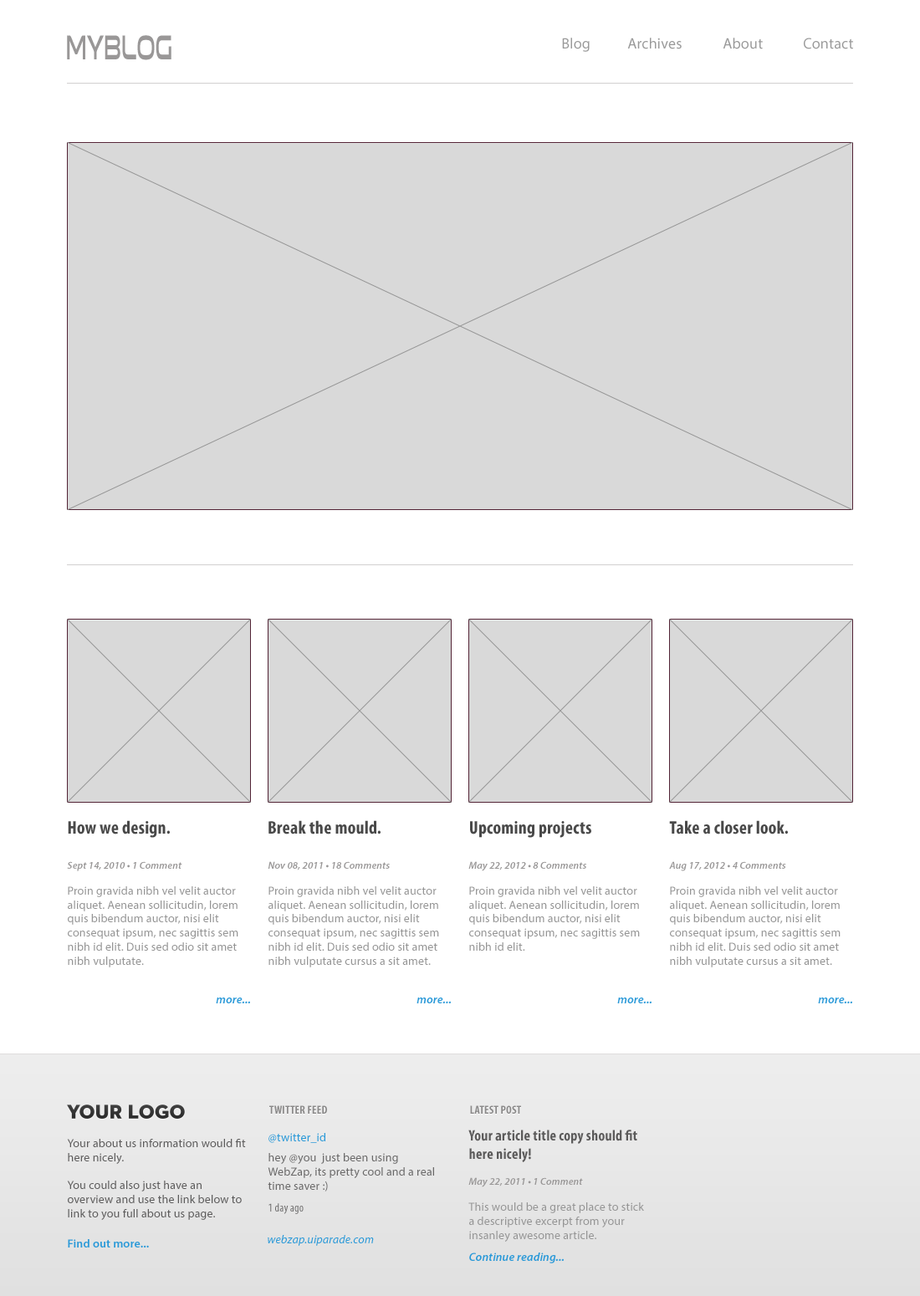
<style>
.page{position:relative;width:920px;height:1296px;background:#ffffff}
.page>*{position:absolute;margin:0}
.t1{font:15.1px "MyriadPro-Regular";letter-spacing:0.013em;color:#999999}
.t2{font:18.4px "MyriadPro-BoldCond";letter-spacing:0.013em;color:#494949}
.t3{font:11.7px "MyriadPro-Regular";letter-spacing:0.013em;color:#959595}
.t4{font:10px "MyriadPro-SemiboldIt";letter-spacing:0.013em;color:#999797}
.t5{font:11.7px "MyriadPro-SemiboldIt";letter-spacing:0.013em;color:#2a99d8}
.t6{font:11.7px "MyriadPro-BoldCond";letter-spacing:0.013em;color:#8a8989}
.t7{font:11.7px "MyriadPro-Regular";letter-spacing:0.013em;color:#2a99d8}
.t8{font:15.1px "MyriadPro-BoldCond";letter-spacing:0.013em;color:#5c5b5b}
.t9{font:11.7px "MyriadPro-Regular";letter-spacing:0.013em;color:#5d5c5c}
.t10{font:11.7px "MyriadPro-Regular";letter-spacing:0.013em;color:#6a6969}
.t11{font:11.7px "MyriadPro-Cond";letter-spacing:0.013em;color:#6a6969}
.t12{font:11.7px "MyriadPro-Semibold";letter-spacing:0.013em;color:#2a99d8}
.t13{font:11.7px "MyriadPro-It";letter-spacing:0.013em;color:#2a99d8}
</style>
<div class="page">
<p class="t1" style="left:562px;top:38px;width:28px;height:14px">Blog</p>
<p class="t1" style="left:627px;top:38px;width:55px;height:11px">Archives</p>
<p class="t1" style="left:723px;top:38px;width:40px;height:11px">About</p>
<p class="t1" style="left:804px;top:38px;width:49px;height:11px">Contact</p>
<p class="t2" style="left:68px;top:820px;width:102px;height:18px">How we design.</p>
<p class="t2" style="left:268px;top:820px;width:113px;height:15px">Break the mould.</p>
<p class="t2" style="left:470px;top:821px;width:121px;height:17px">Upcoming projects</p>
<p class="t2" style="left:669px;top:820px;width:119px;height:15px">Take a closer look.</p>
<p class="t3" style="left:67px;top:861px;width:171px;height:107px"><span class="t4">Sept 14, 2010 • 1 Comment<br><br></span>Proin gravida nibh vel velit auctor aliquet. Aenean sollicitudin, lorem quis bibendum auctor, nisi elit consequat ipsum, nec sagittis sem nibh id elit. Duis sed odio sit amet nibh vulputate.</p>
<p class="t3" style="left:268px;top:861px;width:171px;height:107px"><span class="t4">Nov 08, 2011 • 18 Comments<br><br></span>Proin gravida nibh vel velit auctor aliquet. Aenean sollicitudin, lorem quis bibendum auctor, nisi elit consequat ipsum, nec sagittis sem nibh id elit. Duis sed odio sit amet nibh vulputate cursus a sit amet.</p>
<p class="t3" style="left:468px;top:861px;width:172px;height:90px"><span class="t4">May 22, 2012 • 8 Comments<br><br></span>Proin gravida nibh vel velit auctor aliquet. Aenean sollicitudin, lorem quis bibendum auctor, nisi elit consequat ipsum, nec sagittis sem nibh id elit.</p>
<p class="t3" style="left:669px;top:861px;width:171px;height:107px"><span class="t4">Aug 17, 2012 • 4 Comments<br><br></span>Proin gravida nibh vel velit auctor aliquet. Aenean sollicitudin, lorem quis bibendum auctor, nisi elit consequat ipsum, nec sagittis sem nibh id elit. Duis sed odio sit amet nibh vulputate cursus a sit amet.</p>
<p class="t5" style="left:216px;top:998px;width:34px;height:6px">more...</p>
<p class="t5" style="left:416px;top:998px;width:35px;height:6px">more...</p>
<p class="t5" style="left:617px;top:998px;width:34px;height:6px">more...</p>
<p class="t5" style="left:818px;top:998px;width:34px;height:6px">more...</p>
<p class="t6" style="left:269px;top:1106px;width:58px;height:8px">TWITTER FEED</p>
<p class="t6" style="left:470px;top:1106px;width:51px;height:8px">LATEST POST</p>
<p class="t7" style="left:268px;top:1133px;width:57px;height:10px">@twitter_id</p>
<p class="t8" style="left:468px;top:1130px;width:169px;height:32px">Your article title copy should fit here nicely!</p>
<p class="t9" style="left:67px;top:1139px;width:179px;height:81px">Your about us information would fit here nicely. <br><br>You could also just have an overview and use the link below to link to you full about us page.</p>
<p class="t10" style="left:268px;top:1153px;width:166px;height:39px">hey @you  just been using WebZap, its pretty cool and a real time saver :)</p>
<p class="t4" style="left:468px;top:1177px;width:115px;height:11px">May 22, 2011 • 1 Comment</p>
<p class="t11" style="left:268px;top:1203px;width:36px;height:11px">1 day ago</p>
<p class="t3" style="left:468px;top:1203px;width:176px;height:39px">This would be a great place to stick a descriptive excerpt from your insanley awesome article.</p>
<p class="t12" style="left:68px;top:1239px;width:81px;height:9px">Find out more...</p>
<p class="t13" style="left:268px;top:1235px;width:106px;height:11px">webzap.uiparade.com</p>
<p class="t5" style="left:469px;top:1253px;width:95px;height:11px">Continue reading...</p>
</div>
